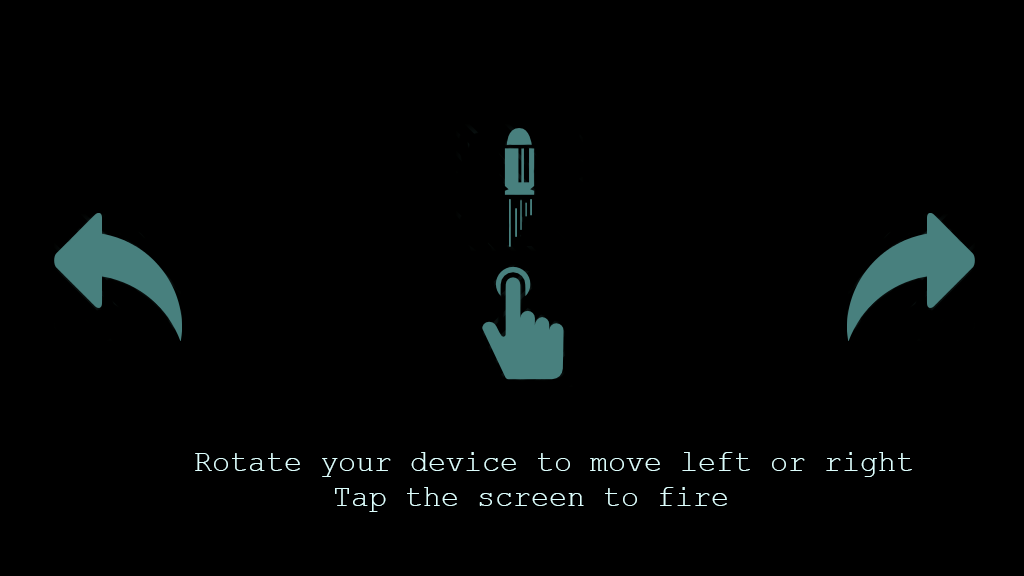
<style>
.page{position:relative;width:1024px;height:576px;background:#000000}
.page>*{position:absolute;margin:0}
.t1{font:30px "CourierNewPSMT";color:#ddfefd}
</style>
<div class="page">
<p class="t1" style="left:195px;top:452px;width:717px;height:25px">Rotate your device to move left or right</p>
<p class="t1" style="left:335px;top:487px;width:392px;height:25px">Tap the screen to fire</p>
</div>
